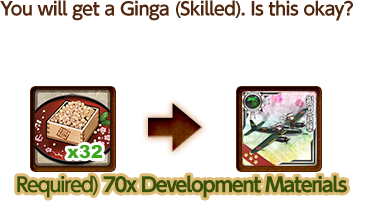
<style>
.page{position:relative;width:368px;height:201px;background:#ffffff}
.page>*{position:absolute;margin:0}
.t1{font:18px "UDShinGoPro-DeBold";letter-spacing:-0.04em;color:#50260d}
.t2{font:20px "UDShinGoPro-Bold";letter-spacing:-0.08em;color:#375309}
.t3{font:20px "UDShinGoPro-DeBold";letter-spacing:-0.08em;color:#375309}
</style>
<div class="page">
<p class="t1" style="left:0px;top:0px;width:353px;height:21px">You will get a Ginga (Skilled). Is this okay?</p>
<p class="t2" style="left:17px;top:175px;width:330px;height:23px"><span class="t3">Required) </span>70x Development Materials</p>
</div>
